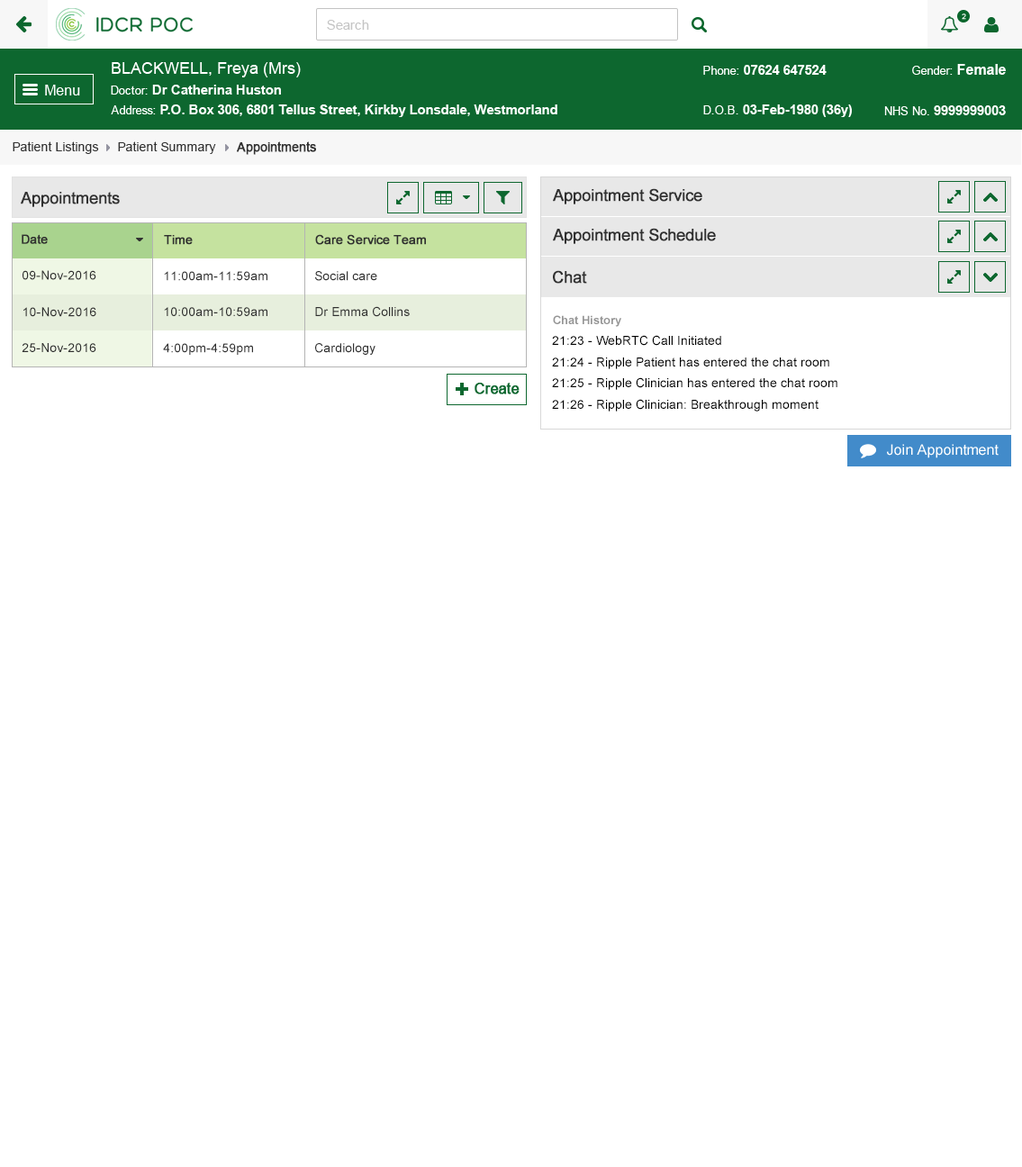
<style>
.page{position:relative;width:1022px;height:1167px;background:#ffffff}
.page>*{position:absolute;margin:0}
.t1{font:12.6px "ArialMT";color:#313131}
.t2{font:12.6px "ArialMT";color:#313131;font-weight:bold}
.t3{font:16.2px "ArialMT";color:#303030;font-weight:bold}
.t4{font:12.6px "ArialMT";color:#303030;font-weight:bold}
.t5{font:12.6px "ArialMT";color:#303030}
.t6{font:11.7px "Arial-BoldMT";color:#959595}
.t7{font:12.6px/21.3px "ArialMT";color:#000000}
</style>
<div class="page">
<p class="t1" style="left:13px;top:141px;width:86px;height:13px">Patient Listings</p>
<p class="t1" style="left:118px;top:141px;width:98px;height:13px">Patient Summary</p>
<p class="t2" style="left:237px;top:141px;width:79px;height:14px">Appointments</p>
<p class="t3" style="left:21px;top:192px;width:99px;height:15px">Appointments</p>
<p class="t3" style="left:553px;top:188px;width:149px;height:16px">Appointment Service</p>
<p class="t3" style="left:553px;top:228px;width:163px;height:16px">Appointment Schedule</p>
<p class="t4" style="left:22px;top:234px;width:26px;height:10px">Date</p>
<p class="t4" style="left:164px;top:235px;width:29px;height:10px">Time</p>
<p class="t4" style="left:315px;top:234px;width:111px;height:11px">Care Service Team</p>
<p class="t5" style="left:23px;top:270px;width:73px;height:10px">09-Nov-2016</p>
<p class="t5" style="left:164px;top:271px;width:103px;height:10px">11:00am-11:59am</p>
<p class="t5" style="left:315px;top:271px;width:62px;height:10px">Social care</p>
<p class="t3" style="left:553px;top:270px;width:34px;height:14px">Chat</p>
<p class="t5" style="left:23px;top:307px;width:73px;height:10px">10-Nov-2016</p>
<p class="t5" style="left:164px;top:307px;width:103px;height:9px">10:00am-10:59am</p>
<p class="t5" style="left:315px;top:306px;width:95px;height:11px">Dr Emma Collins</p>
<p class="t6" style="left:553px;top:315px;width:68px;height:12px">Chat History</p>
<p class="t7" style="left:552px;top:335px;width:285px;height:76px">21:23 - WebRTC Call Initiated<br>21:24 - Ripple Patient has entered the chat room<br>21:25 - Ripple Clinician has entered the chat room<br>21:26 - Ripple Clinician: Breakthrough moment</p>
<p class="t5" style="left:22px;top:343px;width:74px;height:9px">25-Nov-2016</p>
<p class="t5" style="left:163px;top:343px;width:90px;height:12px">4:00pm-4:59pm</p>
<p class="t5" style="left:315px;top:343px;width:60px;height:12px">Cardiology</p>
</div>
